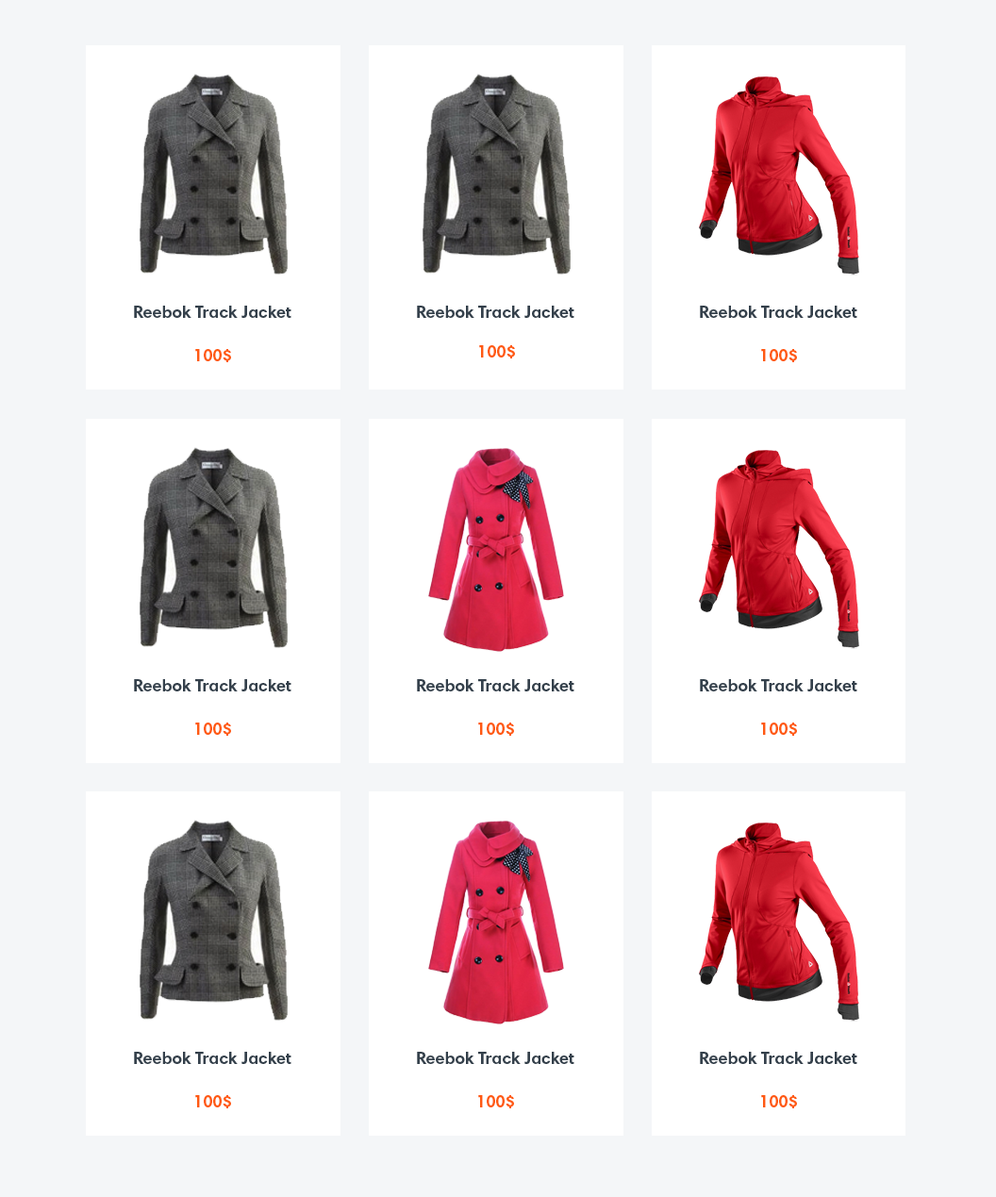
<style>
.page{position:relative;width:996px;height:1197px;background:#ffffff}
.page>*{position:absolute;margin:0}
.t1{font:17px "HarmoniaSansProCyr-Bold";color:#34404b}
.t2{font:17px "HarmoniaSansProCyr-Bold";color:#ff5912}
</style>
<div class="page">
<p class="t1" style="left:134px;top:306px;width:157px;height:12px">Reebok Track Jacket</p>
<p class="t1" style="left:417px;top:306px;width:157px;height:12px">Reebocmccmmmk Track Jacket</p>
<p class="t1" style="left:700px;top:306px;width:157px;height:12px">Reebok Track Jacket</p>
<p class="t2" style="left:195px;top:349px;width:36px;height:13px">$100</p>
<p class="t2" style="left:479px;top:345px;width:36px;height:13px">$100</p>
<p class="t2" style="left:761px;top:349px;width:36px;height:13px">$100</p>
<p class="t1" style="left:134px;top:679px;width:157px;height:12px">Reebok Track Jacket</p>
<p class="t1" style="left:417px;top:679px;width:157px;height:12px">Reebok Track Jacket</p>
<p class="t1" style="left:700px;top:679px;width:157px;height:12px">Reebok Track Jacket</p>
<p class="t2" style="left:195px;top:723px;width:36px;height:13px">$100</p>
<p class="t2" style="left:478px;top:723px;width:36px;height:13px">$100</p>
<p class="t2" style="left:761px;top:723px;width:36px;height:13px">$100</p>
<p class="t1" style="left:134px;top:1052px;width:157px;height:12px">Reebok Track Jacket</p>
<p class="t1" style="left:417px;top:1052px;width:157px;height:12px">Reebok Track Jacket</p>
<p class="t1" style="left:700px;top:1052px;width:157px;height:12px">Reebok Track Jacket</p>
<p class="t2" style="left:195px;top:1095px;width:36px;height:13px">$100</p>
<p class="t2" style="left:478px;top:1095px;width:36px;height:13px">$100</p>
<p class="t2" style="left:761px;top:1095px;width:36px;height:13px">$100</p>
</div>
